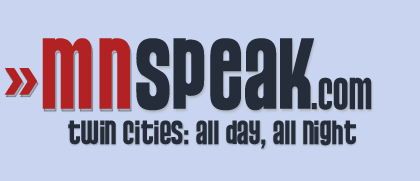
<style>
.page{position:relative;width:420px;height:181px;background:#c9d5f0}
.page>*{position:absolute;margin:0}
.t1{font:106px "PussycatSnickers";color:#252d3a}
.t2{font:106px "PussycatSnickers";color:#b22222}
.t3{font:47.1px "PussycatSnickers";color:#252d3a}
.t4{font:106px "PussycatSnickers"}
.t5{font:47.1px "PussycatSnickers"}
.t6{font:35.3px "PussycatSnickers";color:#252d3a}
</style>
<div class="page">
<p class="t1" style="left:4px;top:38px;width:368px;height:73px"><span class="t2">»MN</span>SPEAK<span class="t3">.com</span></p>
<p class="t4" style="left:6px;top:40px;width:367px;height:73px">»MNSPEAK<span class="t5">.com</span></p>
<p class="t6" style="left:68px;top:121px;width:288px;height:29px">twin cities: all day, all night</p>
<p class="t6" style="left:68px;top:120px;width:288px;height:29px">twin cities: all day, all night</p>
</div>
